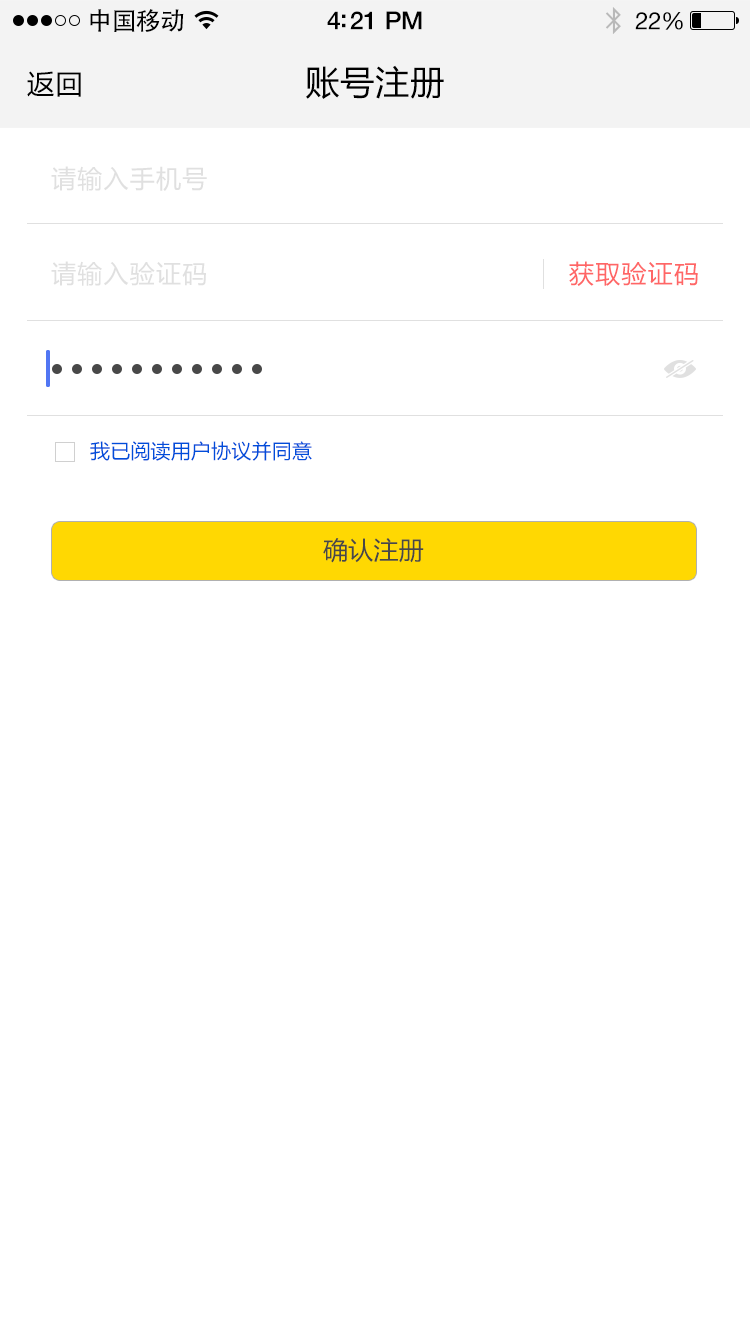
<style>
.page{position:relative;width:750px;height:1334px;background:#ffffff}
.page>*{position:absolute;margin:0}
.t1{font:25px "AdobeHeitiStd-Regular";letter-spacing:-0.025em;color:#000000}
.t2{font:25px "HelveticaNeue-Medium";letter-spacing:-0.02em;color:#000000}
.t3{font:24px "HelveticaNeue";letter-spacing:-0.02em;color:#000000}
.t4{font:34px "MicrosoftYaHei";letter-spacing:0.03em;color:#000000}
.t5{font:27px "MicrosoftYaHei";letter-spacing:0.05em;color:#000000}
.t6{font:25px "MicrosoftYaHei";letter-spacing:0.05em;color:#e0e0e0}
.t7{font:25px "MicrosoftYaHei";letter-spacing:0.05em;color:#ff6666}
.t8{font:20px "MicrosoftYaHei";letter-spacing:0.01em;color:#004dda}
.t9{font:25px "MicrosoftYaHei";letter-spacing:0.01em;color:#555555}
</style>
<div class="page">
<p class="t1" style="left:90px;top:9px;width:94px;height:23px">中国移动</p>
<p class="t2" style="left:327px;top:11px;width:95px;height:19px">4:21 PM</p>
<p class="t3" style="left:635px;top:12px;width:48px;height:18px">22%</p>
<p class="t4" style="left:306px;top:65px;width:138px;height:34px">账号注册</p>
<p class="t5" style="left:27px;top:71px;width:54px;height:26px">返回</p>
<p class="t6" style="left:51px;top:166px;width:156px;height:25px">请输入手机号</p>
<p class="t6" style="left:51px;top:261px;width:155px;height:25px">请输入验证码</p>
<p class="t7" style="left:569px;top:261px;width:129px;height:25px">获取验证码</p>
<p class="t8" style="left:90px;top:441px;width:222px;height:20px">我已阅读用户协议并同意</p>
<p class="t9" style="left:323px;top:538px;width:101px;height:25px">确认注册</p>
</div>
